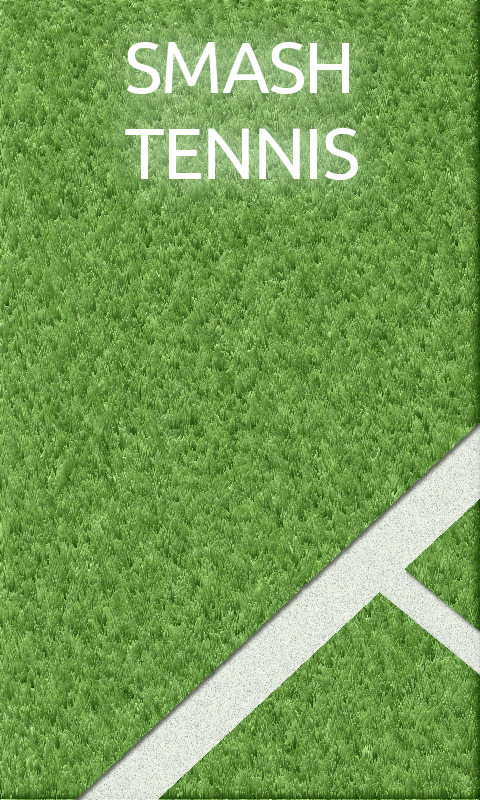
<style>
.page{position:relative;width:480px;height:800px}
.page>*{position:absolute;margin:0}
.t1{font:72px "Earthbound";color:#ffffff}
</style>
<div class="page">
<p class="t1" style="left:125px;top:42px;width:233px;height:138px">SMASH<br>TENNIS</p>
</div>
